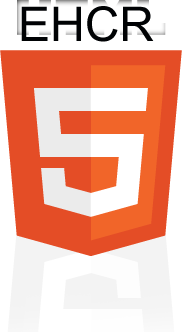
<style>
.page{position:relative;width:182px;height:332px;background:#ffffff}
.page>*{position:absolute;margin:0}
.t1{font:48px "DokChampa";color:#000204}
</style>
<div class="page">
<p class="t1" style="left:21px;top:6px;width:133px;height:36px">EHCR</p>
</div>
